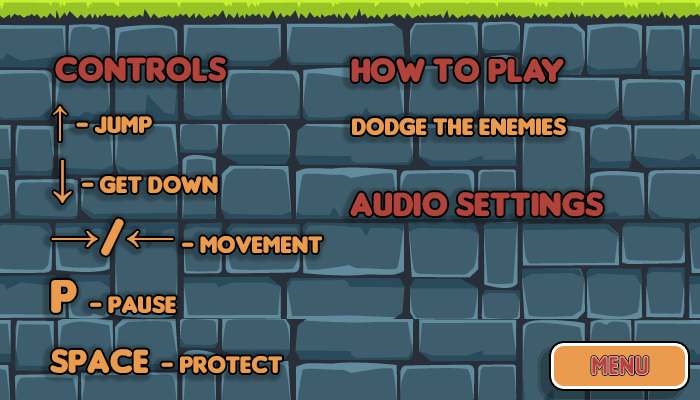
<style>
.page{position:relative;width:700px;height:400px;background:#3e5e6d}
.page>*{position:absolute;margin:0}
.t1{font:35px "Insaniburger";color:#b1433a}
.t2{font:25px "Insaniburger";color:#ea9b4e}
.t3{font:40px "TimesNewRomanPSMT";color:#ea9b4e}
.t4{font:50px "TimesNewRomanPSMT";color:#ea9b4e}
.t5{font:50px "Insaniburger";color:#ea9b4e}
.t6{font:35px "Insaniburger";color:#ea9b4e}
.t7{font:28.6px "Insaniburger";scale:0.86 1}
</style>
<div class="page">
<p class="t1" style="left:55px;top:57px;width:171px;height:24px">controls</p>
<p class="t1" style="left:351px;top:58px;width:213px;height:24px">how to play</p>
<p class="t2" style="left:50px;top:106px;width:272px;height:267px"><span class="t3">↑</span> - JUMP<br><span class="t4">↓ </span>- GET DOWN<br><span class="t4">→</span><span class="t5">/</span><span class="t4">← </span>- MOVEMENT<br><span class="t5">p </span>- pause<br><span class="t6">space </span>- protect</p>
<p class="t2" style="left:352px;top:118px;width:214px;height:17px">dodge the enemies</p>
<p class="t1" style="left:350px;top:192px;width:253px;height:24px">audio settings</p>
<p class="t7" style="left:591px;top:356px;width:58px;height:19px">menu</p>
</div>
